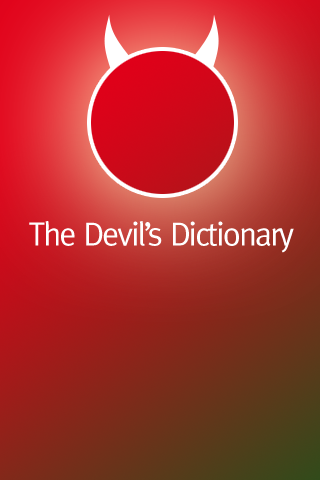
<style>
.page{position:relative;width:320px;height:480px}
.page>*{position:absolute;margin:0}
.t1{font:33.7px "Meta-Normal";letter-spacing:-0.06em;color:#ffffff}
</style>
<div class="page">
<p class="t1" style="left:29px;top:221px;width:265px;height:32px">The Devil’s Dictionary</p>
</div>
